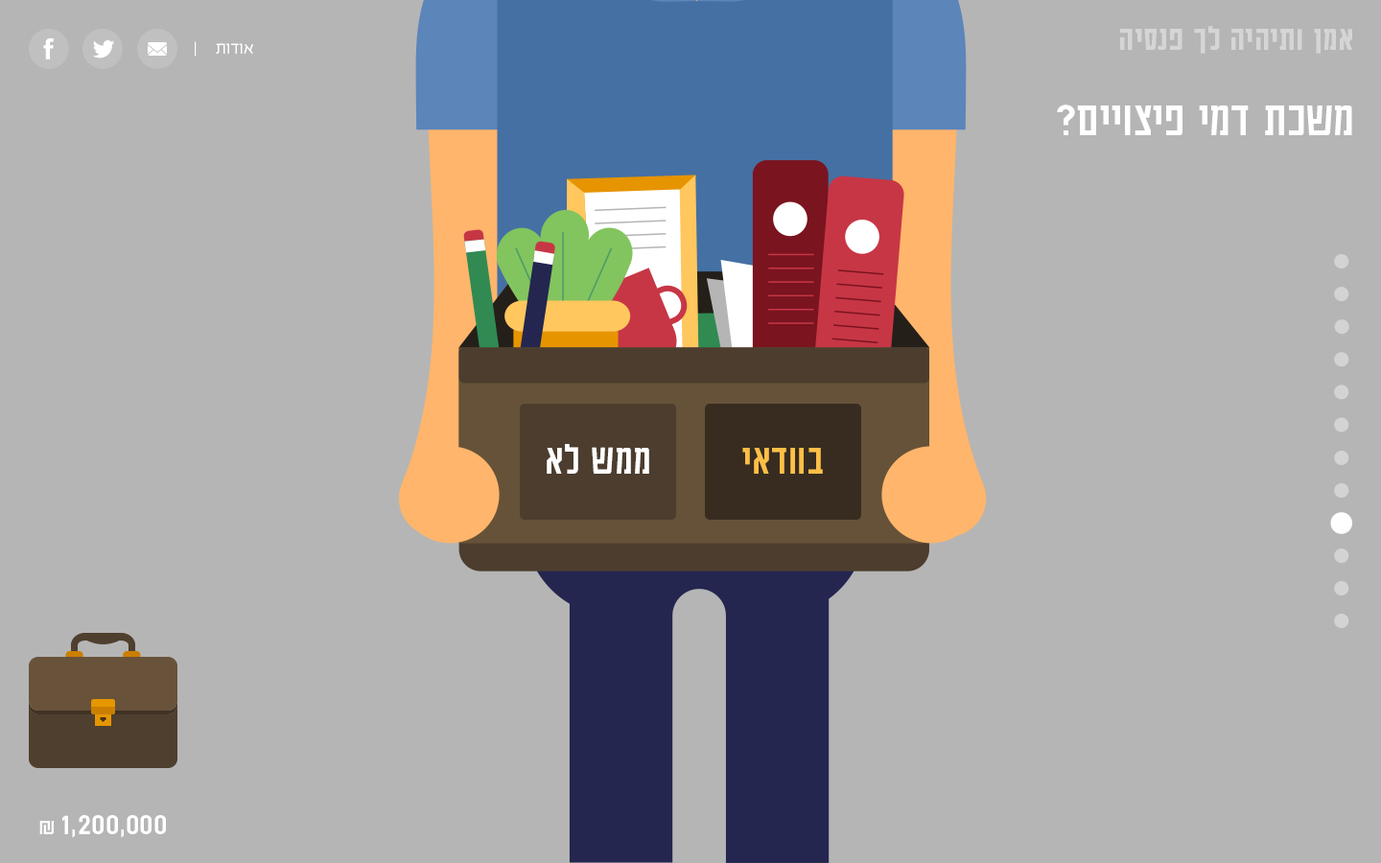
<style>
.page{position:relative;width:1381px;height:863px;background:#b5b5b5}
.page>*{position:absolute;margin:0}
.t1{font:37.8px "AdumaFOT-Medium";color:#d5d5d5}
.t2{font:19.2px "EzerBlock_OE-Light";color:#ffffff}
.t3{font:53.8px "AdumaFOT-Regular";color:#ffffff}
.t4{font:46.8px "AdumaFOT-Regular";color:#ffffff}
.t5{font:46.8px "AdumaFOT-Regular";color:#ffbf47}
.t6{font:33.6px "AdumaFOT-Regular";color:#ffffff}
.t7{font:24px "AdumaFOT-Regular";color:#ffffff}
</style>
<div class="page">
<p class="t1" style="left:1120px;top:26px;width:232px;height:28px">אמן ותיהיה לך פנסיה</p>
<p class="t2" style="left:195px;top:41px;width:58px;height:16px">אודות     |</p>
<p class="t3" style="left:1057px;top:105px;width:295px;height:30px">משכת דמי פיצויים?</p>
<p class="t4" style="left:547px;top:444px;width:102px;height:30px">ממש לא</p>
<p class="t5" style="left:742px;top:448px;width:81px;height:26px">בוודאי</p>
<p class="t6" style="left:39px;top:815px;width:127px;height:23px">1,200,000<span class="t7"> ₪</span></p>
</div>
